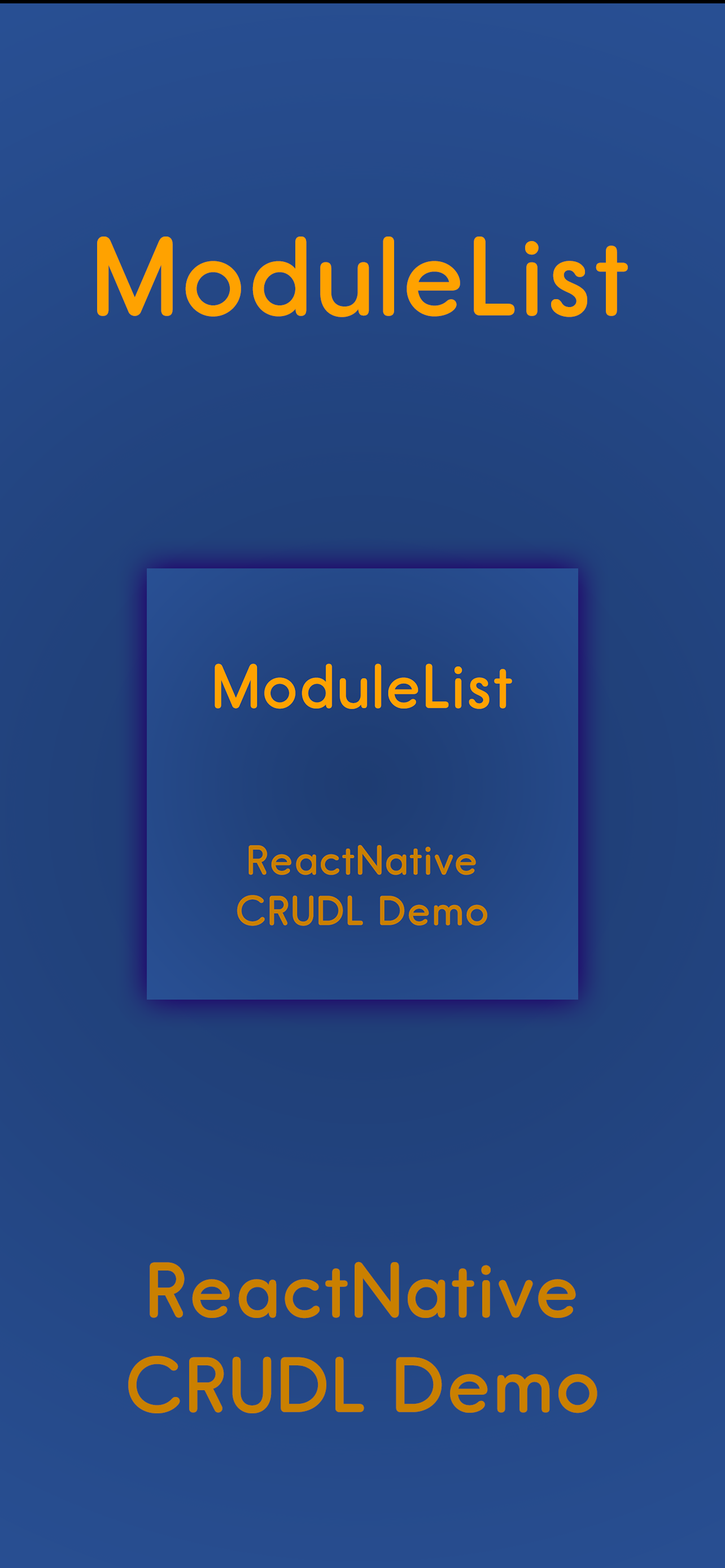
<style>
.page{position:relative;width:725px;height:1568px}
.page>*{position:absolute;margin:0}
.t1{font:112.9px "ReportSb-Regular";letter-spacing:0.05em;color:#ffa200}
.t2{font:79px "ReportSb-Regular";letter-spacing:0.05em;color:#ca8000}
</style>
<div class="page">
<p class="t1" style="left:97px;top:236px;width:531px;height:81px">ModuleList</p>
<p class="t2" style="left:128px;top:1262px;width:469px;height:151px;text-align:center">ReactNative<br>CRUDL Demo</p>
</div>
